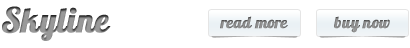
<style>
.page{position:relative;width:410px;height:48px;background:#ffffff}
.page>*{position:absolute;margin:0}
.t1{font:34px "Lobster1.4";color:#999999;font-weight:bold}
.t2{font:16px "Lobster1.4";color:#999999;font-weight:bold}
</style>
<div class="page">
<p class="t1" style="left:2px;top:6px;width:109px;height:35px">Skyline</p>
<p class="t2" style="left:220px;top:16px;width:68px;height:13px">read more</p>
<p class="t2" style="left:334px;top:16px;width:56px;height:17px">buy now</p>
</div>
